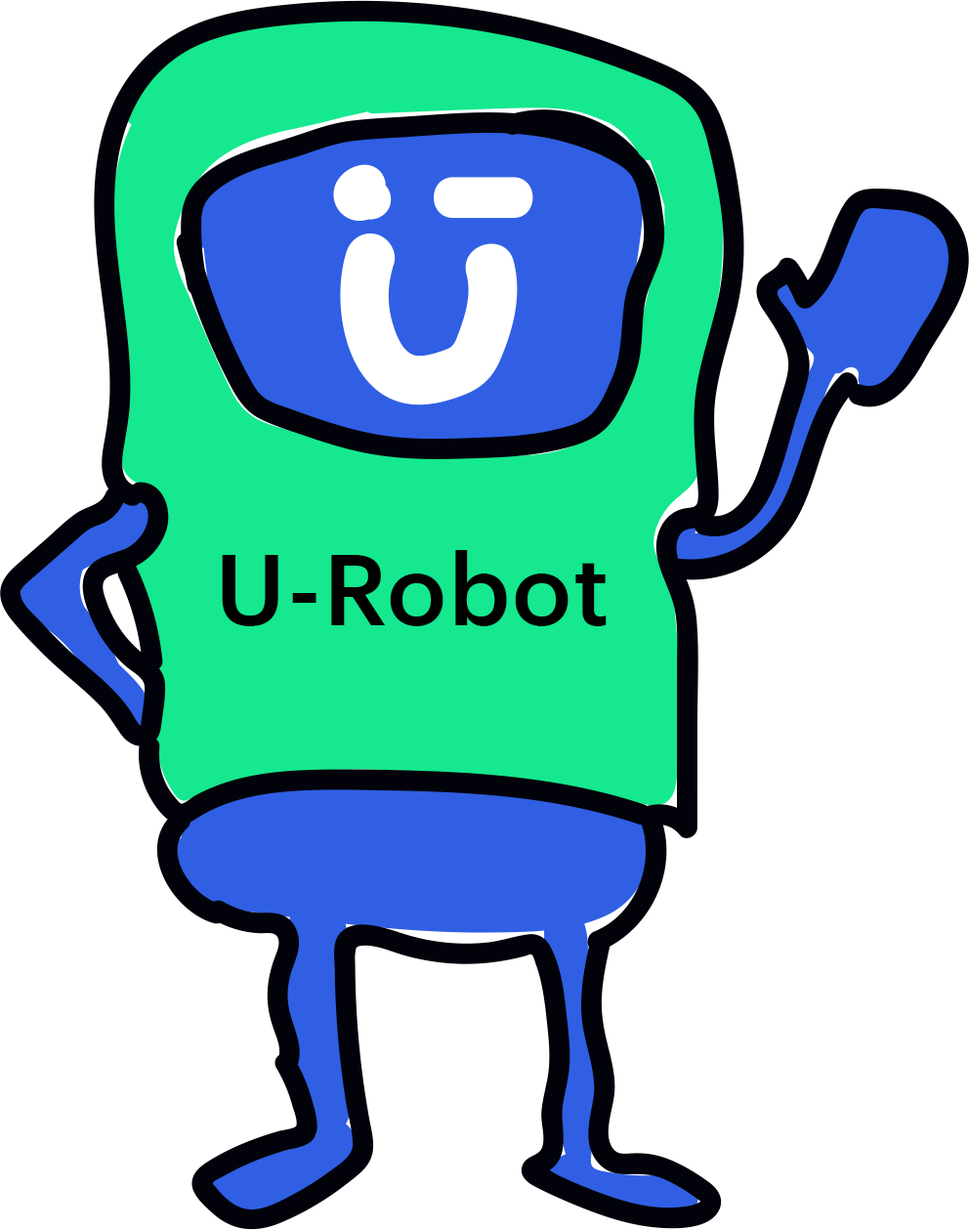
<style>
.page{position:relative;width:969px;height:1230px;background:#ffffff}
.page>*{position:absolute;margin:0}
.t1{font:97.7px "GraphikLCWeb-Medium";letter-spacing:0.014em;color:#000000}
</style>
<div class="page">
<p class="t1" style="left:222px;top:550px;width:385px;height:76px">U-Robot</p>
</div>
